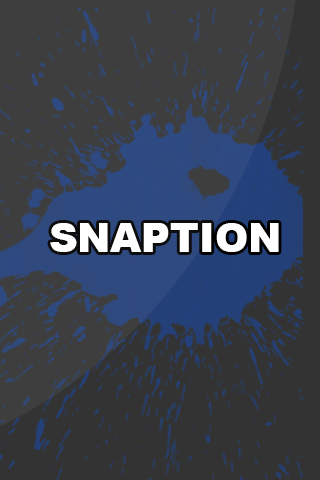
<style>
.page{position:relative;width:320px;height:480px;background:#3e3e3e}
.page>*{position:absolute;margin:0}
.t1{font:40px "Arial-Black";color:#ffffff;text-transform:uppercase}
</style>
<div class="page">
<p class="t1" style="left:50px;top:223px;width:229px;height:29px">SNAPTION</p>
</div>
